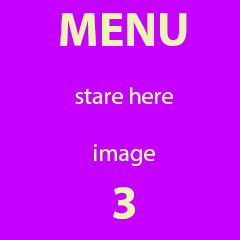
<style>
.page{position:relative;width:240px;height:240px;background:#c600ff}
.page>*{position:absolute;margin:0}
.t1{font:24px "MyriadPro-Regular";color:#edf4b1}
.t2{font:48px "MyriadPro-Bold";color:#edf4b1}
</style>
<div class="page">
<p class="t1" style="left:60px;top:13px;width:127px;height:206px;text-align:center"><span class="t2">MENU<br></span><br>stare here<br><br>image <br><span class="t2">3</span></p>
</div>
